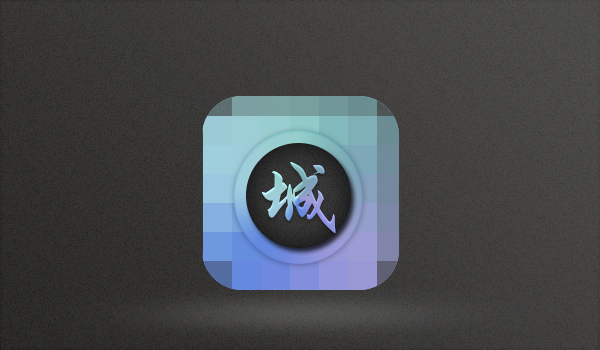
<style>
.page{position:relative;width:600px;height:350px}
.page>*{position:absolute;margin:0}
.t1{font:80px "STXingkai-SC-Bold"}
</style>
<div class="page">
<p class="t1" style="left:261px;top:162px;width:75px;height:71px">城</p>
</div>
